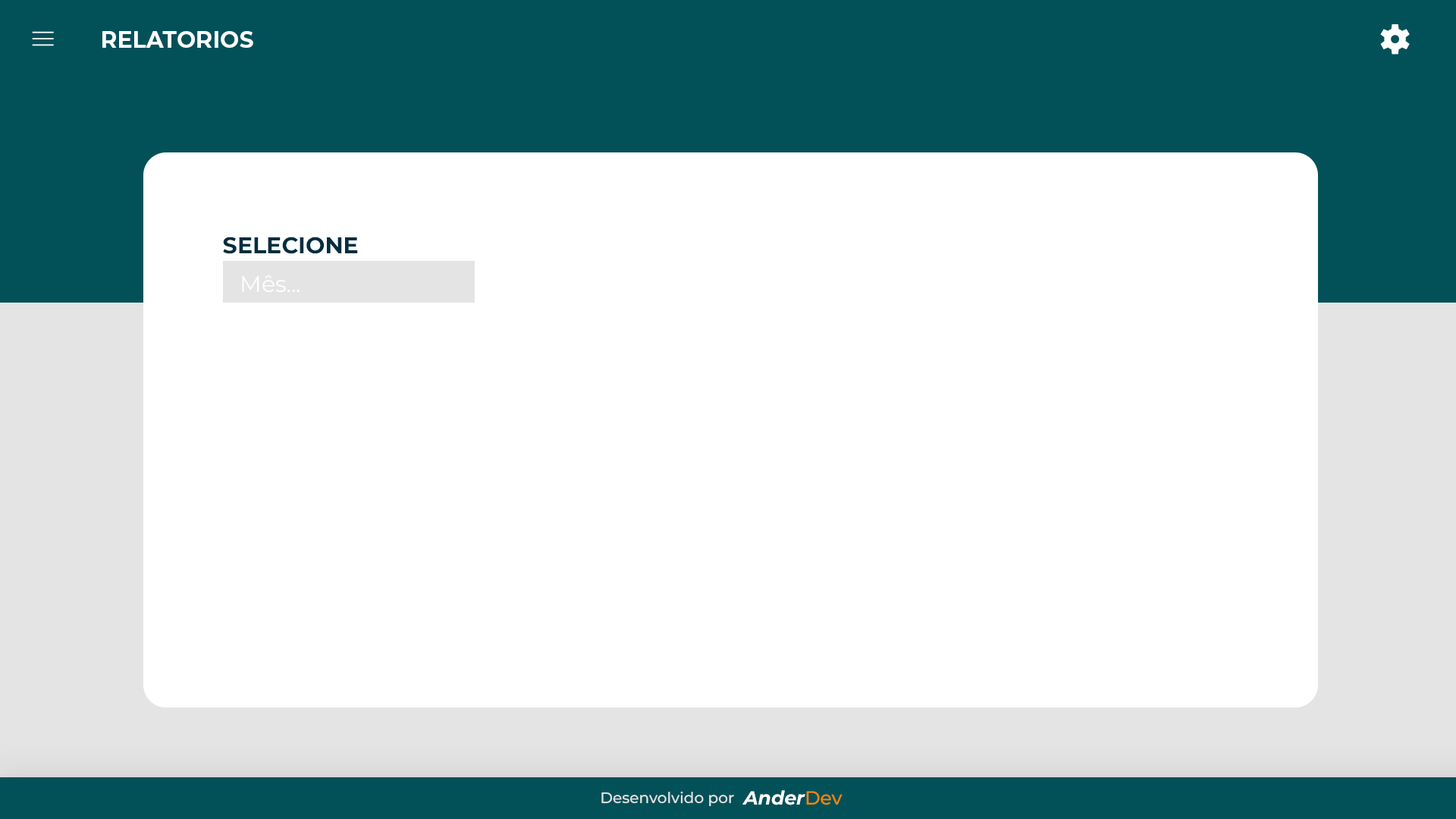
<style>
.page{position:relative;width:1456px;height:819px;background:#ffffff}
.page>*{position:absolute;margin:0}
.t1{font:22.7px "Montserrat-Bold";color:#ffffff}
.t2{font:22.7px "Montserrat-Bold";color:#012e40}
.t3{font:22.7px "Montserrat-Regular";color:#ffffff}
.t4{font:15.2px "Montserrat-Medium";color:#e4e4e4}
.t5{font:19px "Montserrat-BoldItalic";color:#ffffff}
.t6{font:19px "Montserrat-Medium";color:#f28705}
</style>
<div class="page">
<p class="t1" style="left:102px;top:31px;width:151px;height:17px">RELATORIOS</p>
<p class="t2" style="left:223px;top:237px;width:135px;height:17px">SELECIONE</p>
<p class="t3" style="left:242px;top:275px;width:58px;height:18px">Mês...</p>
<p class="t4" style="left:601px;top:791px;width:133px;height:16px">Desenvolvido por</p>
<p class="t5" style="left:742px;top:790px;width:100px;height:15px">Ander<span class="t6">Dev</span></p>
</div>
